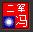
<style>
.page{position:relative;width:33px;height:32px;background:#f20000}
.page>*{position:absolute;margin:0}
.t1{font:10.4px "SimSun";color:#ffffff}
.t2{font:11.7px "SimSun";color:#ffffff}
</style>
<div class="page">
<p class="t1" style="left:7px;top:4px;width:18px;height:8px">二军</p>
<p class="t2" style="left:16px;top:15px;width:11px;height:12px">冯</p>
</div>
